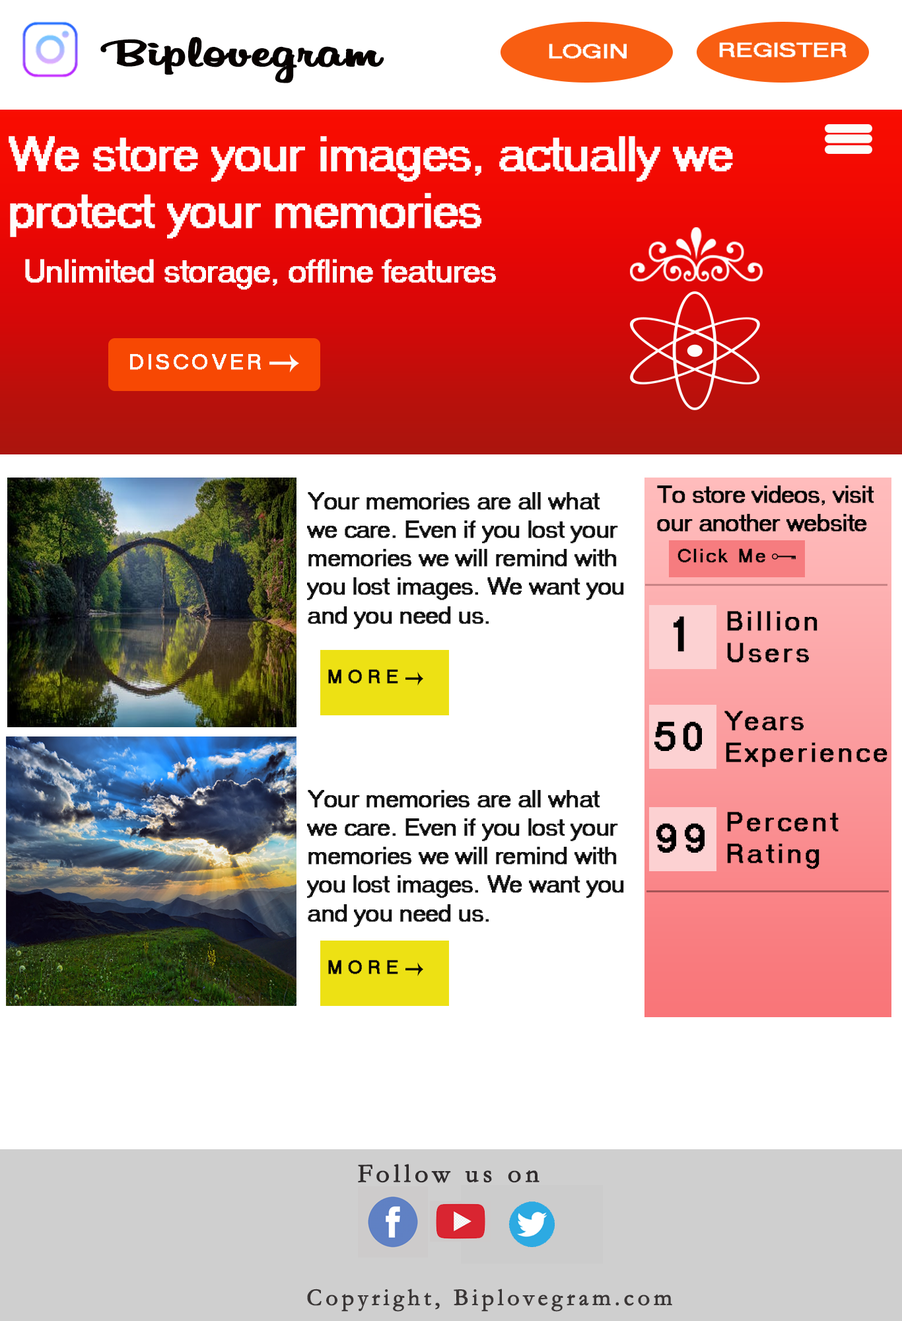
<style>
.page{position:relative;width:902px;height:1321px;background:#ffffff}
.page>*{position:absolute;margin:0}
.t1{font:40.7px "Billabong";color:#070200;font-weight:bold;scale:1.7 1}
.t2{font:47.6px "MS Sans Serif";color:#fefcfb;font-weight:bold}
.t3{font:31.7px "MS Sans Serif";color:#fefcfb;font-weight:bold}
.t4{font:23.8px "MS Sans Serif";color:#030303;font-weight:bold}
.t5{font:23.8px "MS Sans Serif";color:#111111;font-weight:bold}
.t6{font:47.6px "MS Sans Serif";letter-spacing:0.14em;color:#020202;font-weight:bold}
.t7{font:26.4px "MS Sans Serif";letter-spacing:0.14em;color:#010101;font-weight:bold}
.t8{font:26.4px "MS Sans Serif";letter-spacing:0.14em;color:#000000;font-weight:bold}
.t9{font:26.4px "MS Sans Serif";letter-spacing:0.1em;color:#000000;font-weight:bold}
.t10{font:39.6px "MS Sans Serif";letter-spacing:0.14em;color:#010101;font-weight:bold}
.t11{font:39.6px "MS Sans Serif";letter-spacing:0.14em;color:#000000;font-weight:bold}
.t12{font:26.4px "Garamond";letter-spacing:0.14em;color:#2f2b2c;font-weight:bold}
.t13{font:23.8px "Garamond";letter-spacing:0.14em;color:#3a3636;font-weight:bold}
</style>
<div class="page">
<p class="t1" style="left:100px;top:37px;width:285px;height:46px">Biplovegram</p>
<p class="t2" style="left:9px;top:136px;width:724px;height:102px">We store your images, actually we <br>protect your memories</p>
<p class="t3" style="left:25px;top:259px;width:471px;height:31px">Unlimited storage, offline features</p>
<p class="t4" style="left:657px;top:486px;width:218px;height:46px">To store videos, visit <br>our another website</p>
<p class="t5" style="left:307px;top:492px;width:317px;height:138px">Your memories are all what <br>we care. Even if you lost your <br>memories we will remind with<br>you lost images. We want you<br>and you need us.</p>
<p class="t6" style="left:674px;top:616px;width:10px;height:36px">1</p>
<p class="t7" style="left:727px;top:611px;width:91px;height:52px">Billion<br>Users</p>
<p class="t8" style="left:725px;top:711px;width:163px;height:57px"><span class="t9">Years<br></span>Experience</p>
<p class="t10" style="left:655px;top:721px;width:47px;height:30px">50</p>
<p class="t5" style="left:307px;top:790px;width:317px;height:138px">Your memories are all what <br>we care. Even if you lost your <br>memories we will remind with<br>you lost images. We want you<br>and you need us.</p>
<p class="t8" style="left:727px;top:812px;width:112px;height:57px">Percent<br>Rating</p>
<p class="t11" style="left:657px;top:823px;width:48px;height:30px">99</p>
<p class="t12" style="left:358px;top:1164px;width:182px;height:19px">Follow us on</p>
<p class="t13" style="left:307px;top:1289px;width:366px;height:23px">Copyright, Biplovegram.com</p>
</div>
